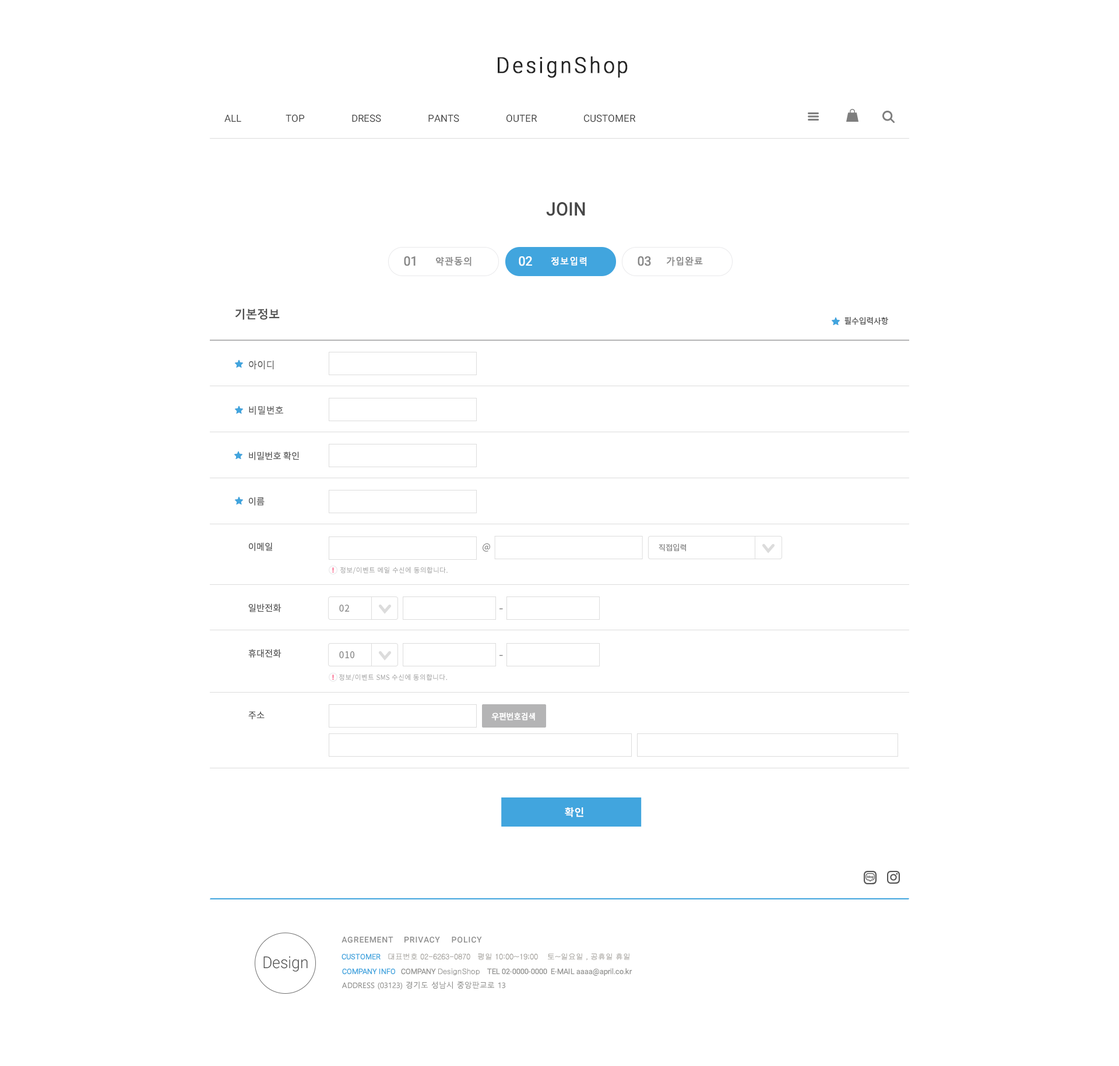
<style>
.page{position:relative;width:1119px;height:1066px;background:#ffffff}
.page>*{position:absolute;margin:0}
.t1{font:22px "Roboto-Light";letter-spacing:0.12em;color:#242424;font-weight:bold;scale:0.91 1}
.t2{font:9.9px "Roboto-Regular";color:#414141;text-transform:uppercase}
.t3{font:18.6px "Roboto-Medium";color:#474747;scale:0.95 1}
.t4{font:12.8px "Roboto-Regular";color:#888888;font-weight:bold;scale:0.95 1}
.t5{font:9.3px "MalgunGothic";color:#888888;font-weight:bold;scale:0.95 1}
.t6{font:9.3px "NotoSansCJKkr-Regular";color:#888888;font-weight:bold;scale:0.95 1}
.t7{font:12.8px "Roboto-Regular";color:#ffffff;font-weight:bold;scale:0.95 1}
.t8{font:9.3px "MalgunGothic";color:#ffffff;font-weight:bold;scale:0.95 1}
.t9{font:11.7px "MalgunGothicBold";letter-spacing:-0.03em;color:#4f4f4f}
.t10{font:8.2px "NotoSansCJKkr-Regular";letter-spacing:-0.03em;color:#4f4f4f}
.t11{font:9px/45.4px "NotoSansCJKkr-Regular";letter-spacing:0.015em;color:#555555}
.t12{font:9px/45.4px "MalgunGothic";letter-spacing:0.015em;color:#555555}
.t13{font:9px "NotoSansCJKkr-Regular";letter-spacing:0.015em;color:#888888}
.t14{font:7.9px "NotoSansCJKkr-Regular";letter-spacing:0.015em;color:#888888}
.t15{font:6.8px "NotoSansCJKkr-DemiLight";letter-spacing:0.015em;color:#888888}
.t16{font:12.4px "NotoSansCJKkr-Regular";letter-spacing:0.015em;color:#888888}
.t17{font:9px "NotoSansCJKkr-Regular";letter-spacing:0.015em;color:#555555}
.t18{font:8.2px "NotoSansCJKkr-Regular";letter-spacing:-0.03em;color:#ffffff;text-transform:uppercase;font-weight:bold;scale:0.96 1}
.t19{font:10.5px "NotoSansCJKkr-Bold";color:#ffffff;text-transform:uppercase}
.t20{font:8.2px "Roboto-Medium";letter-spacing:0.05em;color:#8d8d8d}
.t21{font:7.6px "Gulim";color:#a19e99}
.t22{font:7.6px "Roboto-Regular";color:#41a5de;text-transform:uppercase}
.t23{font:16.3px "Roboto-Light";color:#474747;scale:0.95 1}
.t24{font:7.6px/14px "Roboto-Regular";color:#959593}
.t25{font:7.6px/14px "Roboto-Regular";color:#41a5de}
.t26{font:7.6px/14px "Gulim";color:#959593}
.t27{font:7.6px/14px "MalgunGothic";color:#959593}
</style>
<div class="page">
<p class="t1" style="left:498px;top:56px;width:129px;height:22px">DesignShop</p>
<p class="t2" style="left:224px;top:114px;width:412px;height:8px">ALL                   ToP                    DRESS                    PANTS                    OUTER                    Customer</p>
<p class="t3" style="left:546px;top:202px;width:39px;height:14px">JOIN</p>
<p class="t4" style="left:404px;top:256px;width:11px;height:10px">01</p>
<p class="t5" style="left:436px;top:257px;width:35px;height:9px"><span class="t6"> </span>약관동의</p>
<p class="t7" style="left:518px;top:256px;width:14px;height:10px">02</p>
<p class="t8" style="left:551px;top:257px;width:36px;height:9px">정보입력</p>
<p class="t4" style="left:637px;top:256px;width:14px;height:10px">03</p>
<p class="t5" style="left:666px;top:257px;width:37px;height:9px">가입완료</p>
<p class="t9" style="left:235px;top:309px;width:45px;height:11px">기본정보</p>
<p class="t10" style="left:844px;top:317px;width:44px;height:8px">필수입력사항</p>
<p class="t11" style="left:249px;top:361px;width:50px;height:190px"><span class="t12">아이디<br>비밀번호<br></span>비밀번호 확인<br>이름<br>이메일</p>
<p class="t13" style="left:482px;top:543px;width:8px;height:9px">@</p>
<p class="t14" style="left:658px;top:544px;width:28px;height:8px">직접입력</p>
<p class="t15" style="left:340px;top:567px;width:107px;height:7px">정보/이벤트 메일 수신에 동의합니다.</p>
<p class="t11" style="left:248px;top:604px;width:33px;height:54px">일반전화<br>휴대전화</p>
<p class="t13" style="left:339px;top:605px;width:11px;height:7px">02</p>
<p class="t16" style="left:499px;top:608px;width:4px;height:1px">-</p>
<p class="t13" style="left:339px;top:651px;width:15px;height:7px">010</p>
<p class="t16" style="left:499px;top:655px;width:4px;height:1px">-</p>
<p class="t15" style="left:339px;top:674px;width:108px;height:7px">정보/이벤트 SMS 수신에 동의합니다.</p>
<p class="t17" style="left:248px;top:711px;width:16px;height:8px">주소</p>
<p class="t18" style="left:491px;top:712px;width:44px;height:9px">우편번호검색</p>
<p class="t19" style="left:565px;top:807px;width:18px;height:10px">확인</p>
<p class="t20" style="left:341px;top:937px;width:141px;height:6px">AGREEMENT     PRIVACY     POLICY</p>
<p class="t21" style="left:341px;top:953px;width:288px;height:8px"><span class="t22">CUSTOmer    </span>대표번호 02-6263-0870   평일 10:00~19;00    토~일요일 , 공휴일 휴일</p>
<p class="t23" style="left:263px;top:956px;width:45px;height:16px">Design</p>
<p class="t24" style="left:341px;top:968px;width:291px;height:22px"><span class="t25">COMPANY INFO   </span>COMPANY <span class="t26">DesignShop   </span>TEL 02-0000-0000  E-MAIL aaaa@april.co.kr  <br><span class="t27">ADDRESS (03123) 경기도 성남시 중앙판교로 13</span></p>
</div>
